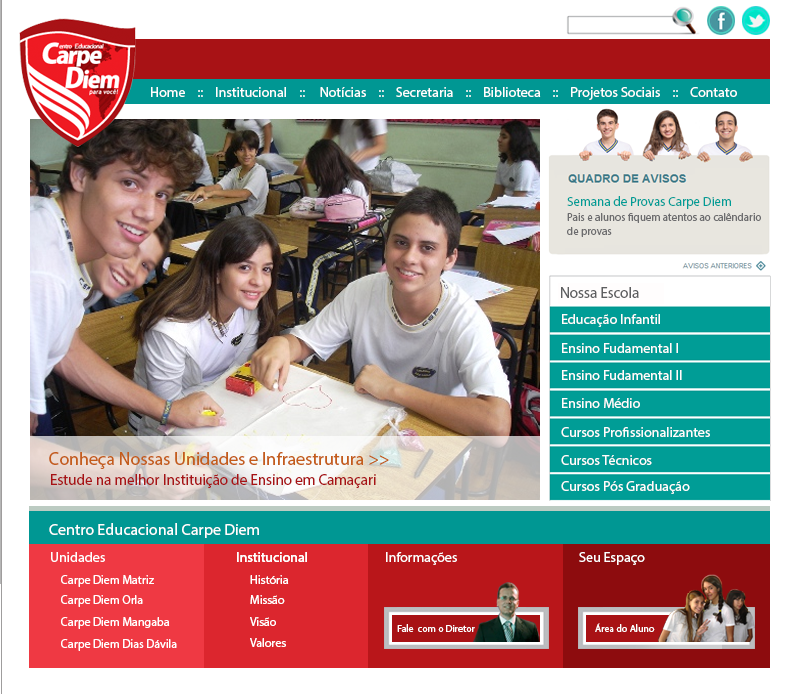
<style>
.page{position:relative;width:800px;height:694px;background:#ffffff}
.page>*{position:absolute;margin:0}
.t1{font:14px "MyriadPro-Regular";color:#ffffff}
.t2{font:13px "TimesNewRomanPSMT";color:#009d96}
.t3{font:11px/14px "TimesNewRomanPSMT";color:#6d6d6f}
.t4{font:15px "MyriadPro-Regular";color:#5e5f61}
.t5{font:14px "MyriadPro-Regular";color:#fffdfd}
.t6{font:18px "MyriadPro-Regular";color:#c45d1b}
.t7{font:15px "MyriadPro-Regular";color:#a81215}
.t8{font:16px "MyriadPro-Regular";color:#ffffff}
.t9{font:12px "MyriadPro-Regular";color:#ffffff}
.t10{font:10px "MyriadPro-Regular";color:#ffffff}
</style>
<div class="page">
<p class="t1" style="left:151px;top:87px;width:586px;height:13px">Home    ::    Institucional    ::     Notícias    ::    Secretaria    ::    Biblioteca    ::    Projetos Sociais    ::    Contato</p>
<p class="t2" style="left:567px;top:196px;width:164px;height:13px">Semana de Provas Carpe Diem</p>
<p class="t3" style="left:567px;top:213px;width:194px;height:24px">Pais e alunos fiquem atentos ao calêndario <br>de provas</p>
<p class="t4" style="left:561px;top:287px;width:78px;height:11px">Nossa Escola</p>
<p class="t5" style="left:562px;top:314px;width:98px;height:13px">Educação Infantil</p>
<p class="t5" style="left:562px;top:343px;width:116px;height:10px">Ensino Fudamental l</p>
<p class="t5" style="left:562px;top:370px;width:120px;height:10px">Ensino Fudamental ll</p>
<p class="t5" style="left:562px;top:398px;width:78px;height:10px">Ensino Médio</p>
<p class="t5" style="left:561px;top:427px;width:149px;height:10px">Cursos Profissionalizantes</p>
<p class="t6" style="left:49px;top:452px;width:340px;height:17px">Conheça Nossas Unidades e Infraestrutura &gt;&gt;</p>
<p class="t5" style="left:561px;top:455px;width:91px;height:10px">Cursos Técnicos</p>
<p class="t7" style="left:51px;top:474px;width:325px;height:14px">Estude na melhor Instituição de Ensino em Camaçari</p>
<p class="t5" style="left:561px;top:481px;width:129px;height:13px">Cursos Pós Graduação</p>
<p class="t8" style="left:49px;top:523px;width:210px;height:15px">Centro Educacional Carpe Diem</p>
<p class="t1" style="left:51px;top:552px;width:54px;height:10px">Unidades</p>
<p class="t1" style="left:237px;top:552px;width:70px;height:10px">Institucional</p>
<p class="t1" style="left:237px;top:552px;width:70px;height:10px">Institucional</p>
<p class="t1" style="left:386px;top:552px;width:71px;height:13px">Informações</p>
<p class="t1" style="left:579px;top:552px;width:66px;height:13px">Seu Espaço</p>
<p class="t9" style="left:61px;top:575px;width:93px;height:12px">Carpe Diem Matriz</p>
<p class="t9" style="left:250px;top:575px;width:39px;height:9px">História</p>
<p class="t9" style="left:61px;top:595px;width:82px;height:12px">Carpe Diem Orla</p>
<p class="t9" style="left:250px;top:595px;width:35px;height:9px">Missão</p>
<p class="t9" style="left:61px;top:617px;width:109px;height:12px">Carpe Diem Mangaba</p>
<p class="t9" style="left:250px;top:617px;width:26px;height:9px">Visão</p>
<p class="t10" style="left:397px;top:624px;width:78px;height:8px">Fale  com o Diretor</p>
<p class="t10" style="left:595px;top:623px;width:60px;height:9px">Área do Aluno</p>
<p class="t9" style="left:61px;top:639px;width:116px;height:12px">Carpe Diem Dias Dávila</p>
<p class="t9" style="left:250px;top:638px;width:36px;height:9px">Valores</p>
</div>
